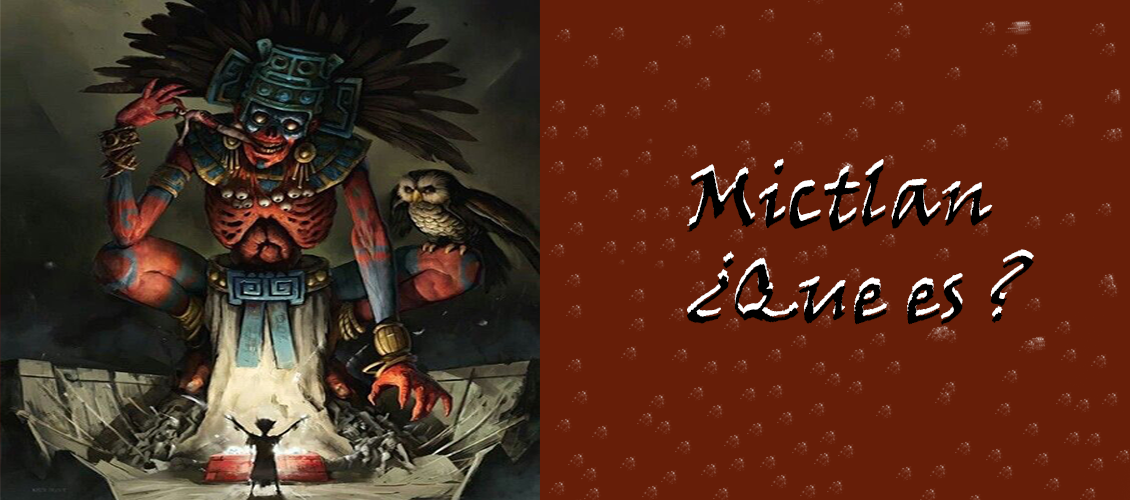
<style>
.page{position:relative;width:1130px;height:500px;background:#661e08}
.page>*{position:absolute;margin:0}
.t1{font:80px "VinerHandITC"}
.t2{font:80px "VinerHandITC";color:#000000}
</style>
<div class="page">
<p class="t1" style="left:687px;top:158px;width:347px;height:161px">Mictlan<br>¿Que es ?</p>
<p class="t2" style="left:687px;top:164px;width:347px;height:161px">Mictlan<br>¿Que es ?</p>
</div>
